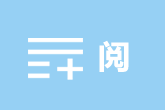
<style>
.page{position:relative;width:165px;height:110px;background:#96d0f4}
.page>*{position:absolute;margin:0}
.t1{font:32px "MicrosoftYaHei-Bold";color:#ffffff}
</style>
<div class="page">
<p class="t1" style="left:99px;top:40px;width:30px;height:32px">阅</p>
</div>
